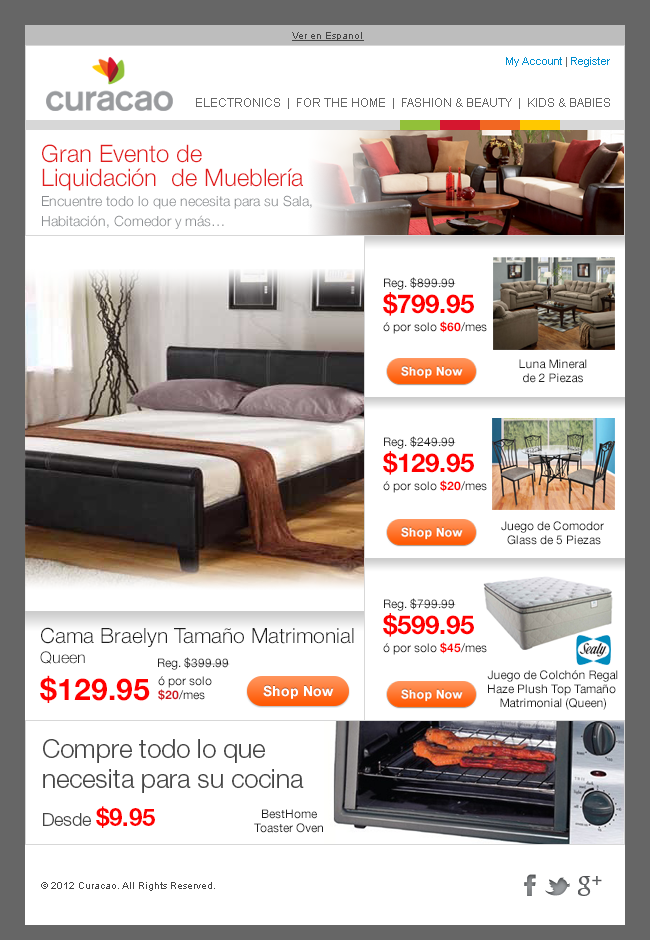
<style>
.page{position:relative;width:650px;height:940px;background:#ffffff}
.page>*{position:absolute;margin:0}
.t1{font:10px "ArialMT";color:#444444;text-decoration:underline}
.t2{font:11px "ArialMT";color:#008ecf}
.t3{font:11px "ArialMT";color:#666666}
.t4{font:12px "ArialMT";color:#666666}
.t5{font:14px/20px "HelveticaNeue-Light";color:#878a8e}
.t6{font:24px/24px "HelveticaNeue-Light";color:#e11d1d}
.t7{font:12px/18px "HelveticaNeue-Roman";color:#1e1e1e}
.t8{font:26px/26px "HelveticaNeue-Bold";color:#ff0000}
.t9{font:12px/14px "HelveticaNeue-Roman";color:#1e1e1e}
.t10{font:12px/18px "HelveticaNeue-Bold";color:#ff0000}
.t11{font:21px/18px "HelveticaNeue-Light";color:#1e1e1e}
.t12{font:16px/20px "HelveticaNeue-Light";color:#1e1e1e}
.t13{font:30px/37px "HelveticaNeue-Bold";color:#ff0000}
.t14{font:12px "HelveticaNeue-Roman";color:#1e1e1e}
.t15{font:12px/14px "HelveticaNeue-Roman";color:#ce181e}
.t16{font:12px/14px "HelveticaNeue-Bold";color:#ce181e}
.t17{font:26px/30px "HelveticaNeue-Light";color:#444444}
.t18{font:18px/24px "HelveticaNeue-Light";color:#444444}
.t19{font:24px/24px "HelveticaNeue-Bold";color:#ff0000}
.t20{font:10px "ArialMT";color:#444444}
</style>
<div class="page">
<p class="t1" style="left:292px;top:32px;width:72px;height:9px">Ver en Espanol</p>
<p class="t2" style="left:506px;top:57px;width:104px;height:10px">My Account<span class="t3"> | </span>Register</p>
<p class="t4" style="left:196px;top:98px;width:414px;height:11px">ELECTRONICS  |  FOR THE HOME  |  FASHION &amp; BEAUTY  |  KIDS &amp; BABIES</p>
<p class="t5" style="left:42px;top:144px;width:270px;height:85px"><span class="t6">Gran Evento de <br>Liquidación  de Mueblería<br></span>Encuentre todo lo que necesita para su Sala, Habitación, Comedor y más…</p>
<p class="t7" style="left:383px;top:277px;width:104px;height:57px">Reg. $899.99<br><span class="t8">$799.95<br></span><span class="t9">ó por solo </span><span class="t10">$60</span>/mes</p>
<p class="t9" style="left:519px;top:359px;width:68px;height:24px;text-align:center">Luna Mineral<br>de 2 Piezas</p>
<p class="t7" style="left:383px;top:436px;width:104px;height:57px">Reg. $249.99<br><span class="t8">$129.95<br></span><span class="t9">ó por solo </span><span class="t10">$20</span>/mes</p>
<p class="t9" style="left:501px;top:521px;width:103px;height:24px;text-align:center">Juego de Comodor <br>Glass de 5 Piezas</p>
<p class="t7" style="left:383px;top:598px;width:104px;height:57px">Reg. $799.99<br><span class="t8">$599.95<br></span><span class="t9">ó por solo </span><span class="t10">$45</span>/mes</p>
<p class="t11" style="left:40px;top:627px;width:314px;height:76px">Cama Braelyn Tamaño Matrimonial<br><span class="t12">Queen<br></span><span class="t13">$129.95</span></p>
<p class="t14" style="left:158px;top:657px;width:72px;height:13px">Reg. $399.99</p>
<p class="t15" style="left:158px;top:676px;width:54px;height:25px">ó por solo<br><span class="t16">$20</span>/mes</p>
<p class="t9" style="left:487px;top:670px;width:131px;height:40px;text-align:center">Juego de Colchón Regal<br>Haze Plush Top Tamaño <br>Matrimonial (Queen)</p>
<p class="t17" style="left:43px;top:739px;width:261px;height:89px">Compre todo lo que necesita para su cocina<br><br><span class="t18">Desde </span><span class="t19">$9.95</span></p>
<p class="t9" style="left:254px;top:809px;width:69px;height:24px;text-align:center">BestHome<br>Toaster Oven</p>
<p class="t20" style="left:41px;top:882px;width:174px;height:9px">© 2012 Curacao. All Rights Reserved.</p>
</div>
